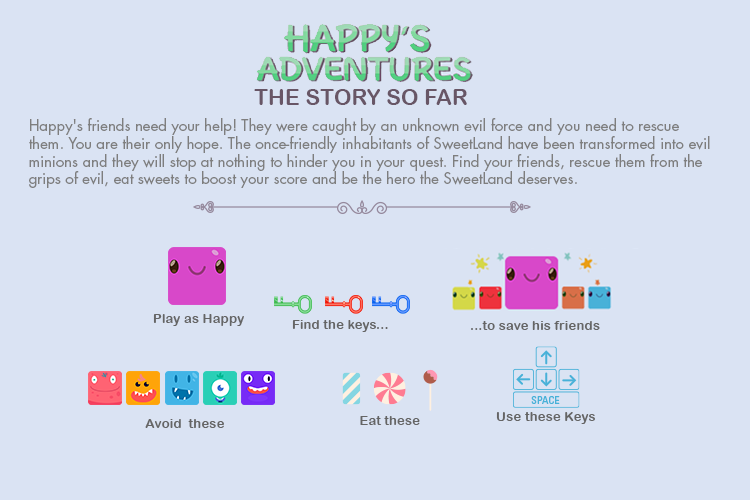
<style>
.page{position:relative;width:750px;height:500px;background:#dae3f3}
.page>*{position:absolute;margin:0}
.t1{font:22.3px "ArialRoundedMTBold";color:#685666}
.t2{font:14.9px "FuturaStd-Book";color:#7e7e7e}
.t3{font:13.4px "ArialRoundedMTBold";color:#656565}
</style>
<div class="page">
<p class="t1" style="left:254px;top:89px;width:213px;height:16px">THE STORY SO FAR</p>
<p class="t2" style="left:29px;top:118px;width:681px;height:70px">Happy's friends need your help! They were caught by an unknown evil force and you need to rescue them. You are their only hope. The once-friendly inhabitants of SweetLand have been transformed into evil minions and they will stop at nothing to hinder you in your quest. Find your friends, rescue them from the grips of evil, eat sweets to boost your score and be the hero the SweetLand deserves.</p>
<p class="t3" style="left:153px;top:314px;width:91px;height:12px">Play as Happy</p>
<p class="t3" style="left:292px;top:320px;width:96px;height:12px">Find the keys...</p>
<p class="t3" style="left:471px;top:321px;width:129px;height:9px">...to save his friends</p>
<p class="t3" style="left:496px;top:412px;width:99px;height:12px">Use these Keys</p>
<p class="t3" style="left:145px;top:419px;width:79px;height:9px">Avoid  these</p>
<p class="t3" style="left:360px;top:416px;width:60px;height:9px">Eat these</p>
</div>
